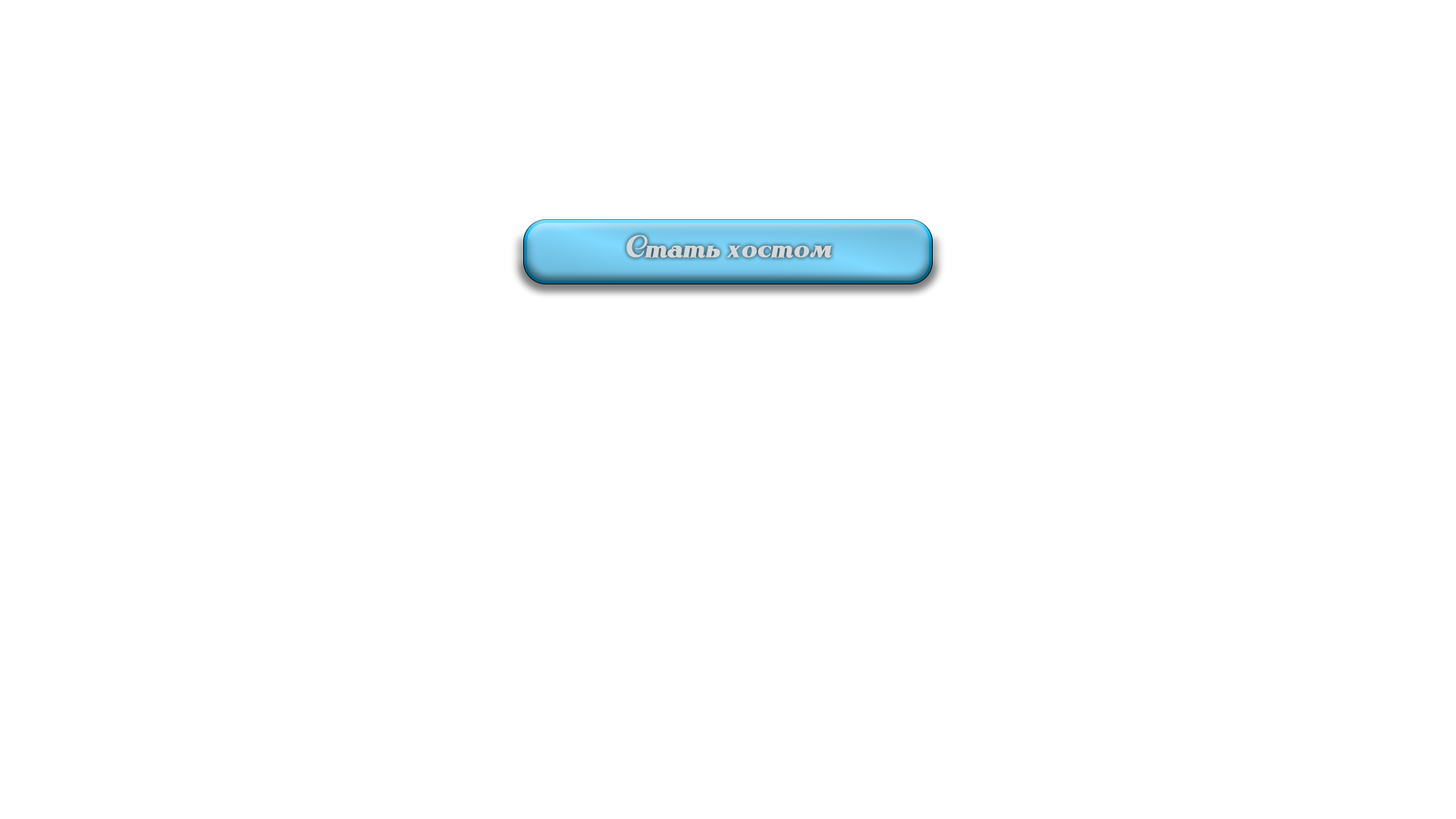
<style>
.page{position:relative;width:1456px;height:819px;background:#ffffff}
.page>*{position:absolute;margin:0}
.t1{font:30.3px "RhythmandJazz";color:#d5d8d8;font-weight:bold}
</style>
<div class="page">
<p class="t1" style="left:626px;top:235px;width:206px;height:23px">Стать хостом</p>
</div>
